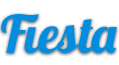
<style>
.page{position:relative;width:119px;height:65px;background:#ffffff}
.page>*{position:absolute;margin:0}
.t1{font:52px "Lobster1.4";color:#048cde}
</style>
<div class="page">
<p class="t1" style="left:1px;top:14px;width:116px;height:40px">Fiesta</p>
</div>
